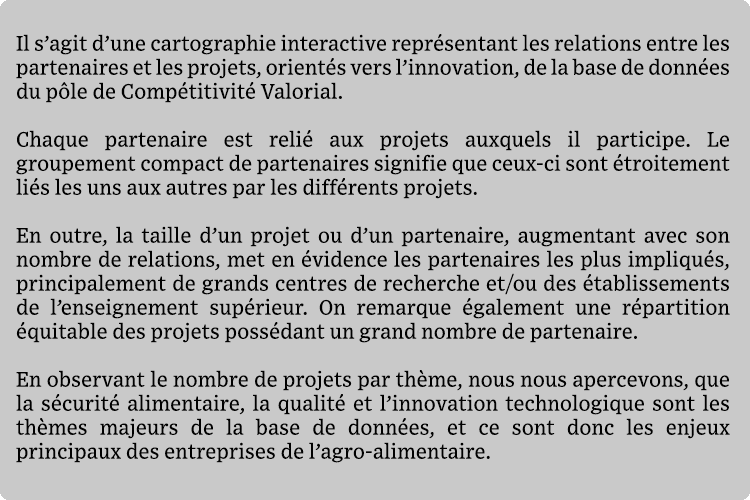
<style>
.page{position:relative;width:750px;height:500px;background:#c9c9c9}
.page>*{position:absolute;margin:0}
.t1{font:20px "Font";color:#000000}
</style>
<div class="page">
<p class="t1" style="left:16px;top:34px;width:714px;height:429px;text-align:justify">Il s’agit d’une cartographie interactive représentant les relations entre les partenaires et les projets, orientés vers l’innovation, de la base de données du pôle de Compétitivité Valorial.<br><br>Chaque partenaire est relié aux projets auxquels il participe. Le groupement compact de partenaires signifie que ceux-ci sont étroitement liés les uns aux autres par les différents projets.<br><br>En outre, la taille d’un projet ou d’un partenaire, augmentant avec son nombre de relations, met en évidence les partenaires les plus impliqués, principalement de grands centres de recherche et/ou des établissements de l’enseignement supérieur. On remarque également une répartition équitable des projets possédant un grand nombre de partenaire.<br><br>En observant le nombre de projets par thème, nous nous apercevons, que la sécurité alimentaire, la qualité et l’innovation technologique sont les thèmes majeurs de la base de données, et ce sont donc les enjeux principaux des entreprises de l’agro-alimentaire.</p>
</div>
